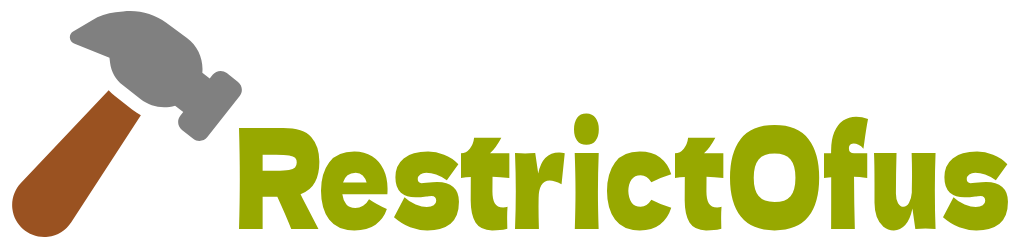
<style>
.page{position:relative;width:1015px;height:246px;background:#ffffff}
.page>*{position:absolute;margin:0}
.t1{font:139.2px "DelaGothicOne-Regular";color:#97a800;scale:0.72 1}
</style>
<div class="page">
<p class="t1" style="left:239px;top:113px;width:769px;height:118px">RestrictOfus</p>
</div>
